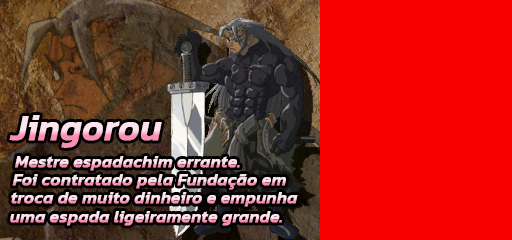
<style>
.page{position:relative;width:512px;height:240px;background:#f80000}
.page>*{position:absolute;margin:0}
.t1{font:36px "Kanit-MediumItalic";font-weight:bold}
.t2{font:17px "Kanit-MediumItalic";font-weight:bold}
</style>
<div class="page">
<p class="t1" style="left:9px;top:115px;width:153px;height:33px">Jingorou</p>
<p class="t2" style="left:15px;top:156px;width:225px;height:15px">Mestre espadachim errante.</p>
<p class="t2" style="left:12px;top:174px;width:274px;height:16px">Foi contratado pela Fundação em</p>
<p class="t2" style="left:11px;top:192px;width:287px;height:15px">troca de muito dinheiro e empunha</p>
<p class="t2" style="left:10px;top:211px;width:272px;height:15px">uma espada ligeiramente grande.</p>
</div>
